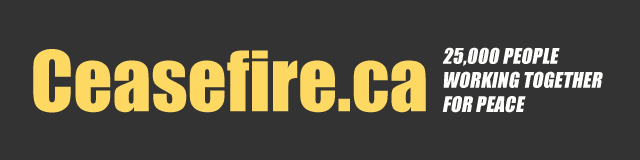
<style>
.page{position:relative;width:640px;height:160px;background:#333333}
.page>*{position:absolute;margin:0}
.t1{font:77px "Impact";color:#fdd963}
.t2{font:20.1px "Impact";color:#fffffe;text-transform:uppercase;font-style:italic}
</style>
<div class="page">
<p class="t1" style="left:33px;top:49px;width:393px;height:64px">Ceasefire.ca</p>
<p class="t2" style="left:442px;top:47px;width:161px;height:66px">25,000 people <br>working together <br>for peace</p>
</div>
